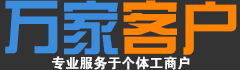
<style>
.page{position:relative;width:240px;height:70px;background:#333333}
.page>*{position:absolute;margin:0}
.t1{font:60px "FZZYK--GBK1-0";color:#3b8ede}
.t2{font:60px "FZZYK--GBK1-0";color:#ff8400}
.t3{font:14px "FZDHTK--GBK1-0";color:#ffffff}
</style>
<div class="page">
<p class="t1" style="left:5px;top:0px;width:232px;height:55px">万家<span class="t2">客户</span></p>
<p class="t3" style="left:52px;top:56px;width:138px;height:14px">专业服务于个体工商户</p>
</div>
